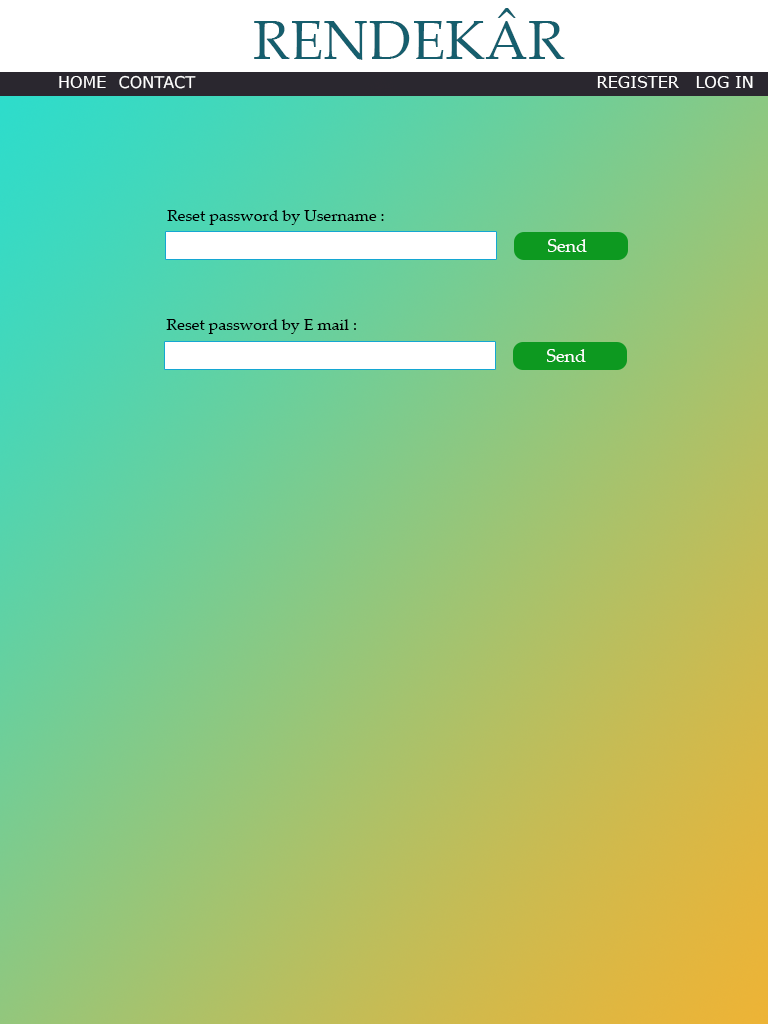
<style>
.page{position:relative;width:768px;height:1024px}
.page>*{position:absolute;margin:0}
.t1{font:55px "PalatinoLinotype-Roman";color:#165e6d}
.t2{font:16px "Verdana";color:#ffffff}
.t3{font:16px "PalatinoLinotype-Roman";color:#000000}
.t4{font:18px "PalatinoLinotype-Roman";color:#ffffff}
</style>
<div class="page">
<p class="t1" style="left:254px;top:8px;width:311px;height:52px">RENDEKÂR</p>
<p class="t2" style="left:59px;top:76px;width:47px;height:12px">HOME</p>
<p class="t2" style="left:119px;top:75px;width:77px;height:14px">CONTACT</p>
<p class="t2" style="left:597px;top:76px;width:82px;height:12px">REGISTER</p>
<p class="t2" style="left:696px;top:76px;width:57px;height:12px">LOG IN</p>
<p class="t3" style="left:167px;top:210px;width:217px;height:15px">Reset password by Username :</p>
<p class="t4" style="left:548px;top:239px;width:39px;height:13px">Send</p>
<p class="t3" style="left:166px;top:319px;width:190px;height:15px">Reset password by E mail :</p>
<p class="t4" style="left:547px;top:349px;width:39px;height:13px">Send</p>
</div>
